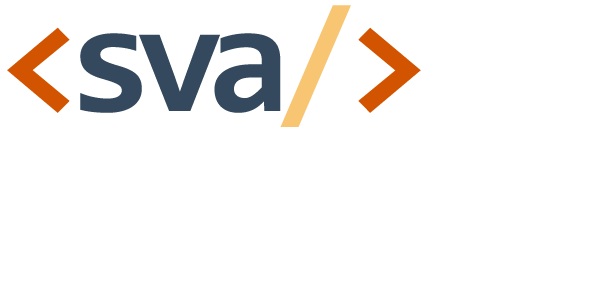
<style>
.page{position:relative;width:600px;height:300px;background:#ffffff}
.page>*{position:absolute;margin:0}
.t1{font:153px "Consolas-Bold";letter-spacing:-0.1em;color:#34495e}
.t2{font:153px "Consolas-Bold";letter-spacing:-0.1em;color:#d35400}
.t3{font:153px "Consolas-Bold";letter-spacing:-0.1em;color:#f8c573}
</style>
<div class="page">
<p class="t1" style="left:7px;top:5px;width:414px;height:122px"><span class="t2">&lt;</span>sva<span class="t3">/</span><span class="t2">&gt;</span></p>
</div>
